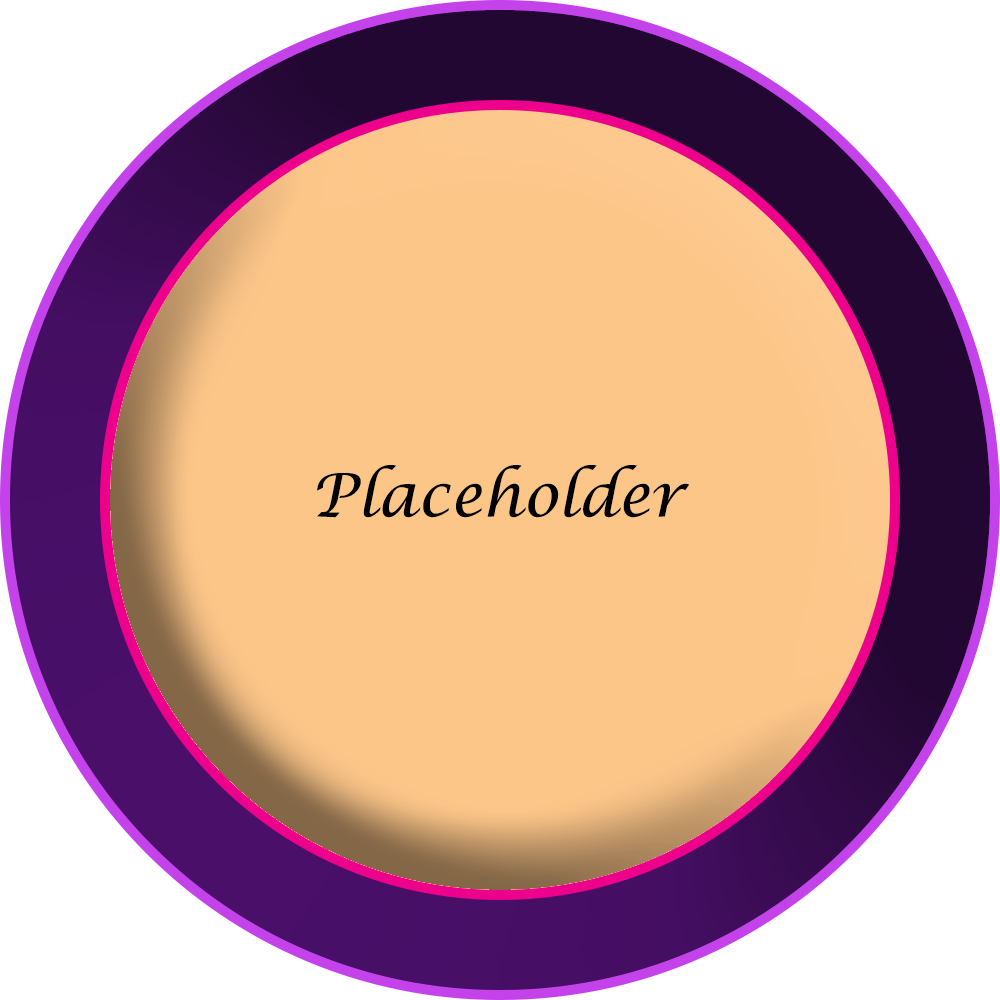
<style>
.page{position:relative;width:1000px;height:1000px;background:#fdc689}
.page>*{position:absolute;margin:0}
.t1{font:60px "LucidaCalligraphy-Italic";color:#000000}
</style>
<div class="page">
<p class="t1" style="left:317px;top:465px;width:373px;height:53px">Placeholder</p>
</div>
